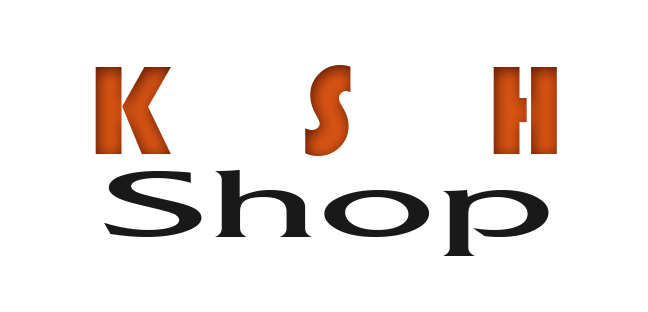
<style>
.page{position:relative;width:648px;height:312px;background:#ffffff}
.page>*{position:absolute;margin:0}
.t1{font:130px "Bauhaus93";letter-spacing:1em;color:#be4710}
.t2{font:95px "UVNLacLongQuan";color:#191919;scale:2.08 1}
</style>
<div class="page">
<p class="t1" style="left:95px;top:65px;width:462px;height:91px">KSH</p>
<p class="t2" style="left:104px;top:170px;width:445px;height:86px">Shop</p>
</div>
